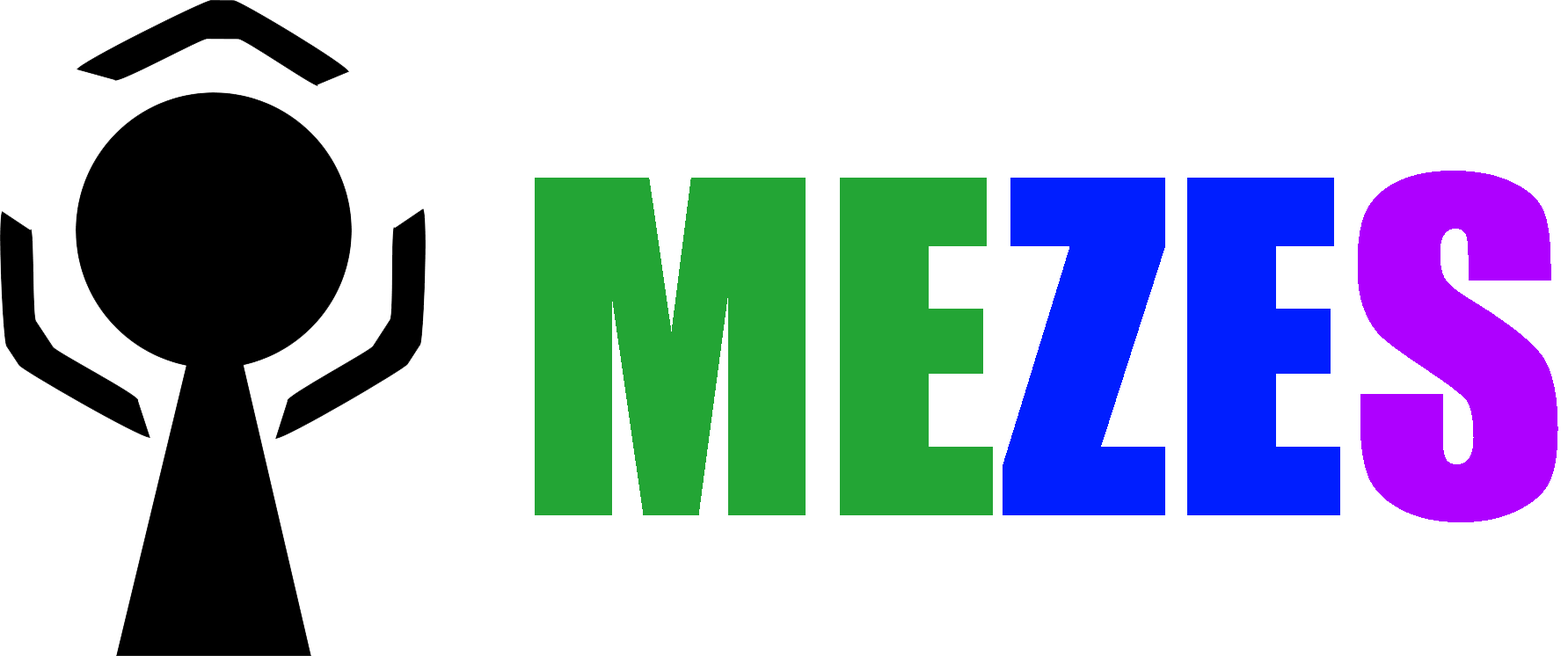
<style>
.page{position:relative;width:1568px;height:656px;background:#ffffff}
.page>*{position:absolute;margin:0}
.t1{font:426.9px "Impact";color:#23a535}
.t2{font:426.9px "Impact";color:#001eff}
.t3{font:426.9px "Impact";color:#ae00ff}
</style>
<div class="page">
<p class="t1" style="left:535px;top:171px;width:1023px;height:351px">ME<span class="t2">ZE</span><span class="t3">S</span></p>
</div>
